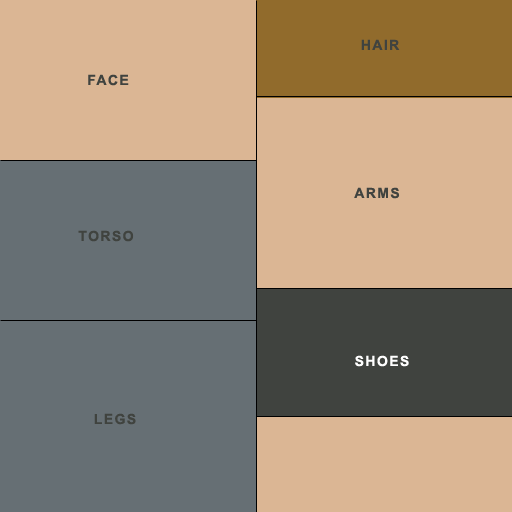
<style>
.page{position:relative;width:512px;height:512px;background:#dbb694}
.page>*{position:absolute;margin:0}
.t1{font:14px "Arial-BoldMT";letter-spacing:0.1em;color:#40433f}
.t2{font:14px "Arial-BoldMT";letter-spacing:0.1em;color:#ffffff}
</style>
<div class="page">
<p class="t1" style="left:361px;top:39px;width:39px;height:11px">HAIR</p>
<p class="t1" style="left:88px;top:74px;width:41px;height:12px">FACE</p>
<p class="t1" style="left:354px;top:187px;width:46px;height:12px">ARMS</p>
<p class="t1" style="left:78px;top:230px;width:56px;height:12px">TORSO</p>
<p class="t2" style="left:355px;top:355px;width:54px;height:12px">SHOES</p>
<p class="t1" style="left:94px;top:413px;width:42px;height:12px">LEGS</p>
</div>
